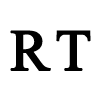
<style>
.page{position:relative;width:100px;height:100px;background:#ffffff}
.page>*{position:absolute;margin:0}
.t1{font:58.3px "TimesNewRomanPSMT";letter-spacing:0.14em;color:#000000;font-weight:bold}
</style>
<div class="page">
<p class="t1" style="left:10px;top:30px;width:81px;height:41px">RT</p>
</div>
